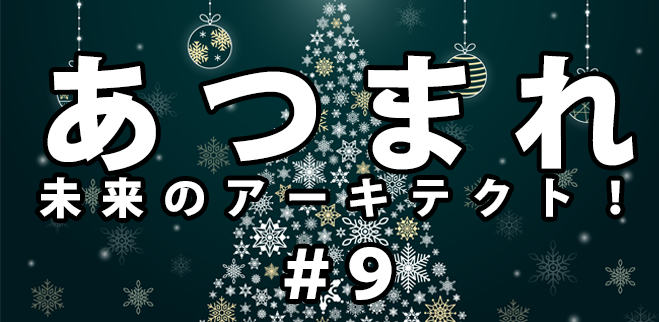
<style>
.page{position:relative;width:659px;height:322px}
.page>*{position:absolute;margin:0}
.t1{font:43px/126px "KozGoPr6N-Heavy";letter-spacing:-0.04em;color:#ffffff}
.t2{font:126px/126px "KozGoPr6N-Heavy";letter-spacing:-0.04em;color:#ffffff}
.t3{font:67px "KozGoPr6N-Heavy";letter-spacing:-0.04em;color:#ffffff}
</style>
<div class="page">
<p class="t1" style="left:39px;top:55px;width:595px;height:164px;text-align:justify"><span class="t2">あつまれ<br></span>未来のアーキテクト！</p>
<p class="t3" style="left:284px;top:247px;width:108px;height:53px">＃９</p>
</div>
